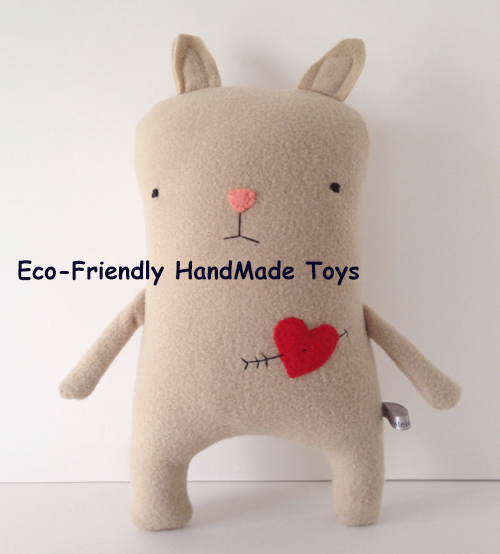
<style>
.page{position:relative;width:500px;height:554px}
.page>*{position:absolute;margin:0}
.t1{font:24px "ComicSansMS-Bold";color:#08092b}
</style>
<div class="page">
<p class="t1" style="left:18px;top:260px;width:341px;height:26px">Eco-Friendly HandMade Toys</p>
</div>
